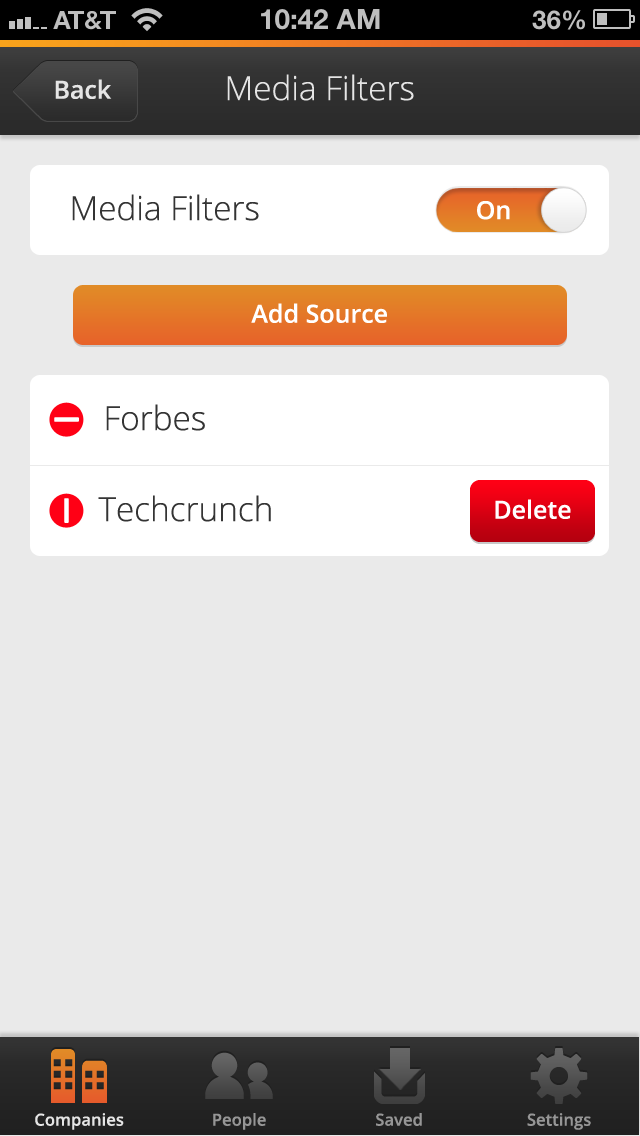
<style>
.page{position:relative;width:640px;height:1136px;background:#eaeaea}
.page>*{position:absolute;margin:0}
.t1{font:33.3px "OpenSans-Light";color:#e5e5e5}
.t2{font:25px "OpenSans-Semibold";color:#e5e5e5}
.t3{font:33.3px "OpenSans-Light";color:#343434}
.t4{font:25px "OpenSans-Semibold";color:#ffffff}
.t5{font:25px "OpenSans-Semibold";color:#fffefe}
.t6{font:16.7px "OpenSans-Semibold";color:#e5e5e5}
.t7{font:16.7px "OpenSans-Semibold";color:#969696}
</style>
<div class="page">
<p class="t1" style="left:227px;top:74px;width:187px;height:27px">Media Filters</p>
<p class="t2" style="left:55px;top:79px;width:57px;height:20px">Back</p>
<p class="t3" style="left:72px;top:194px;width:187px;height:27px">Media Filters</p>
<p class="t4" style="left:477px;top:201px;width:33px;height:19px">On</p>
<p class="t4" style="left:251px;top:303px;width:136px;height:20px">Add Source</p>
<p class="t3" style="left:106px;top:404px;width:99px;height:27px">Forbes</p>
<p class="t3" style="left:98px;top:495px;width:173px;height:27px">Techcrunch</p>
<p class="t5" style="left:495px;top:499px;width:76px;height:20px">Delete</p>
<p class="t6" style="left:35px;top:1113px;width:89px;height:17px">Companies</p>
<p class="t7" style="left:213px;top:1113px;width:53px;height:17px">People</p>
<p class="t7" style="left:376px;top:1113px;width:46px;height:13px">Saved</p>
<p class="t7" style="left:527px;top:1113px;width:64px;height:17px">Settings</p>
</div>
